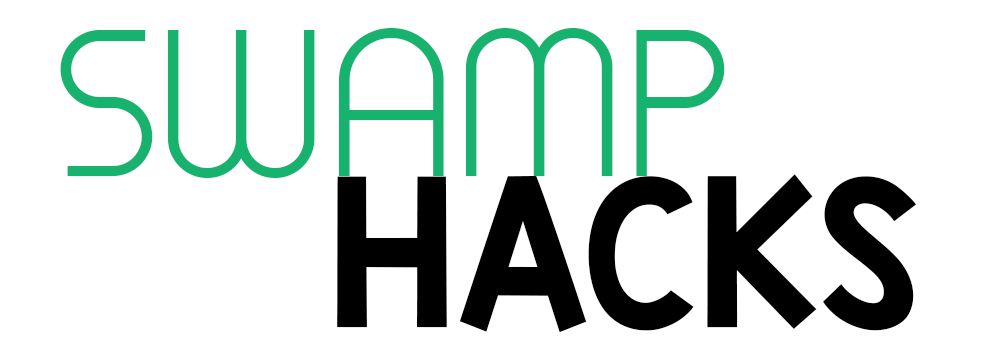
<style>
.page{position:relative;width:1000px;height:350px;background:#ffffff}
.page>*{position:absolute;margin:0}
.t1{font:200px "TimeBurner";color:#17b26e}
.t2{font:172px "KGBlankSpaceSolid";color:#000000}
</style>
<div class="page">
<p class="t1" style="left:60px;top:28px;width:665px;height:150px">SWAMP</p>
<p class="t2" style="left:337px;top:174px;width:579px;height:159px">HACKS</p>
</div>
